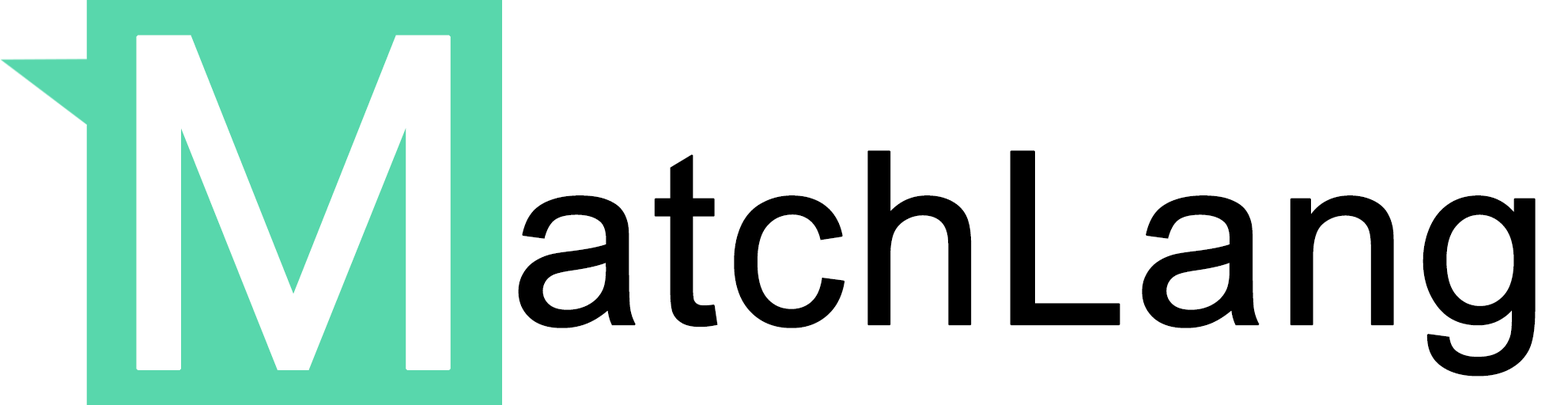
<style>
.page{position:relative;width:1568px;height:405px;background:#ffffff}
.page>*{position:absolute;margin:0}
.t1{font:241.6px "ArialMT";color:#000000;font-weight:bold}
</style>
<div class="page">
<p class="t1" style="left:518px;top:150px;width:1018px;height:226px">atchLang</p>
</div>
